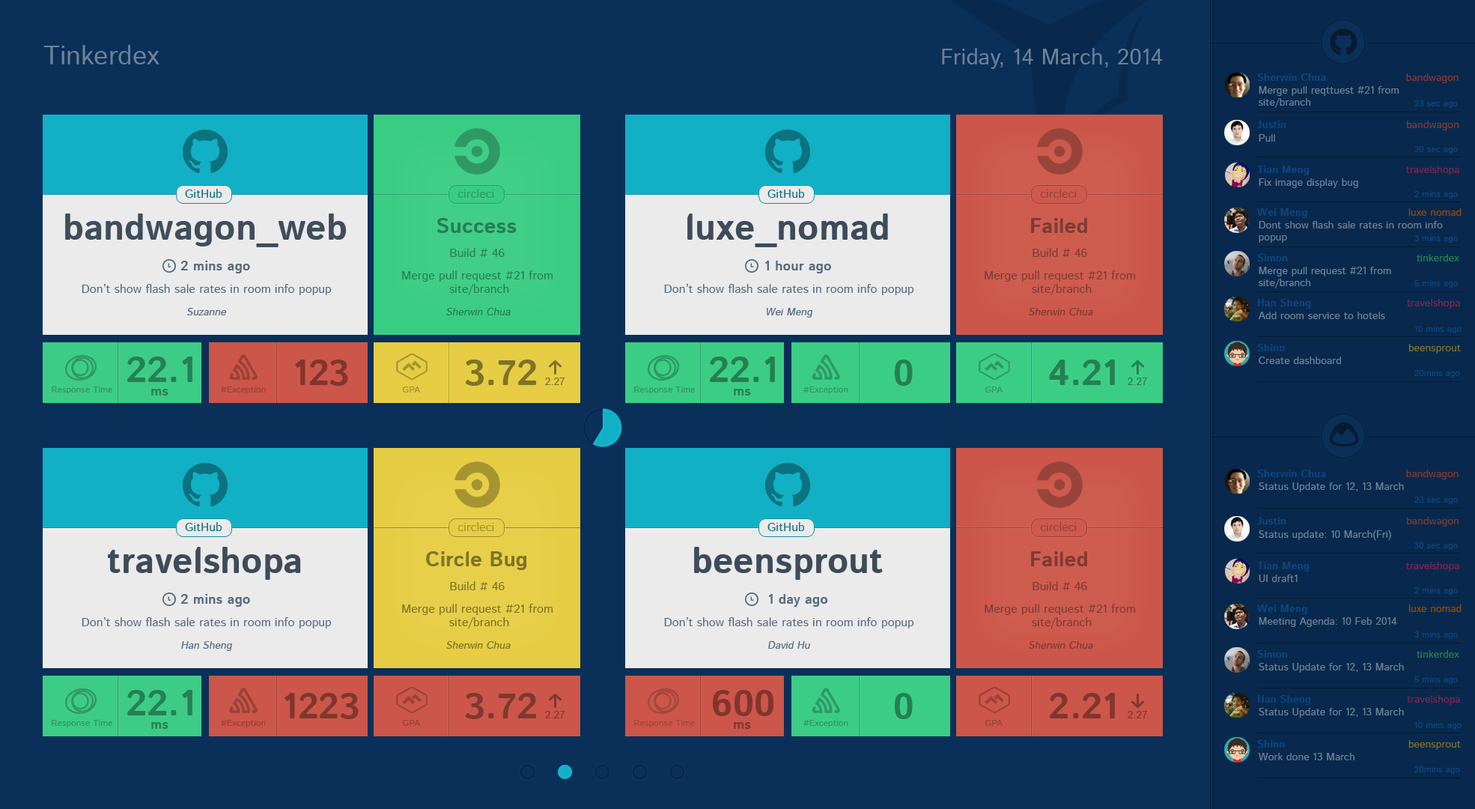
<style>
.page{position:relative;width:1475px;height:809px;background:#0a3059}
.page>*{position:absolute;margin:0}
.t1{font:27px "Istok-Regular";color:#6e8197}
.t2{font:22.5px "Istok-Regular";color:#6e8197}
.t3{font:10.5px "Istok-Bold";color:#0e4580}
.t4{font:10.5px "Istok-Regular";color:#803a32}
.t5{font:10.5px/12px "Istok-Regular";color:#6e8197}
.t6{font:9px "Istok-Regular";color:#0e4580}
.t7{font:10.5px "Istok-Regular";color:#6e8197}
.t8{font:10.5px "Istok-Regular";color:#80254f}
.t9{font:12px "Istok-Regular";color:#0b7280}
.t10{font:12px "Istok-Regular";color:#2b9962}
.t11{font:12px "Istok-Regular";color:#99443a}
.t12{font:10.5px "Istok-Regular";color:#994700}
.t13{font:35.9px "Istok-Bold";color:#404e5c}
.t14{font:21px "Istok-Bold";color:#288054}
.t15{font:35.9px "Istok-Bold";color:#3e4b59}
.t16{font:21px "Istok-Bold";color:#803a32}
.t17{font:12px "Istok-Regular";color:#248052}
.t18{font:12px "Istok-Regular";color:#803a32}
.t19{font:10.5px "Istok-Regular";color:#258052}
.t20{font:13.5px "Istok-Bold";color:#596c80}
.t21{font:12px/13.5px "Istok-Regular";color:#248052}
.t22{font:12px/22.5px "Istok-Regular";color:#248052}
.t23{font:12px/13.5px "Istok-Regular";color:#803a32}
.t24{font:12px/22.5px "Istok-Regular";color:#803a32}
.t25{font:12px "Istok-Regular";color:#596c80}
.t26{font:10.5px "Istok-Regular";color:#596c80;font-style:italic}
.t27{font:10.5px "Istok-Regular";color:#248052;font-style:italic}
.t28{font:10.5px "Istok-Regular";color:#803a32;font-style:italic}
.t29{font:10.5px "Istok-Regular";color:#807225}
.t30{font:35.9px "Istok-Bold";color:#268053}
.t31{font:35.2px "Istok-Bold";color:#80362e}
.t32{font:35.9px "Istok-Bold";color:#807225}
.t33{font:35.9px "Istok-Bold";color:#258052}
.t34{font:35.2px "Istok-Bold";color:#258052}
.t35{font:9px "Istok-Regular";color:#2e9963}
.t36{font:13.5px "Istok-Bold";color:#268053}
.t37{font:9px "Istok-Regular";color:#994137}
.t38{font:9px "Istok-Regular";color:#a69430}
.t39{font:9px "Istok-Regular";color:#2c9963}
.t40{font:13.5px "Istok-Bold";color:#258052}
.t41{font:12px "Istok-Regular";color:#a69432}
.t42{font:12px "Istok-Regular";color:#994137}
.t43{font:21px "Istok-Bold";color:#807226}
.t44{font:12px "Istok-Regular";color:#807226}
.t45{font:12px/13.5px "Istok-Regular";color:#807226}
.t46{font:12px/22.5px "Istok-Regular";color:#807226}
.t47{font:10.5px "Istok-Regular";color:#807226;font-style:italic}
.t48{font:35.9px "Istok-Bold";color:#80362e}
.t49{font:35.9px "Istok-Bold";color:#803830}
.t50{font:10.5px "Istok-Regular";color:#803830}
.t51{font:10.5px "Istok-Regular";color:#80362e}
.t52{font:9px "Istok-Regular";color:#a6463c}
.t53{font:13.5px "Istok-Bold";color:#80362e}
</style>
<div class="page">
<p class="t1" style="left:43px;top:45px;width:116px;height:19px">Tinkerdex</p>
<p class="t2" style="left:942px;top:48px;width:221px;height:21px">Friday, 14 March, 2014</p>
<p class="t3" style="left:1257px;top:73px;width:201px;height:10px">Sherwin Chua             <span class="t4">bandwagon</span></p>
<p class="t5" style="left:1258px;top:86px;width:141px;height:22px">Merge pull reqttuest #21 from <br>site/branch</p>
<p class="t6" style="left:1414px;top:100px;width:44px;height:8px">23 sec ago</p>
<p class="t4" style="left:1257px;top:121px;width:202px;height:9px"><span class="t3">Justin         </span>bandwagon</p>
<p class="t7" style="left:1258px;top:134px;width:17px;height:7px">Pull</p>
<p class="t6" style="left:1414px;top:146px;width:44px;height:7px">30 sec ago</p>
<p class="t8" style="left:1257px;top:165px;width:202px;height:10px"><span class="t3">Tian Meng             </span>travelshopa</p>
<p class="t7" style="left:1258px;top:178px;width:100px;height:10px">Fix image display bug</p>
<p class="t9" style="left:185px;top:189px;width:37px;height:9px">GitHub</p>
<p class="t10" style="left:457px;top:189px;width:37px;height:9px">circleci</p>
<p class="t9" style="left:767px;top:189px;width:38px;height:9px">GitHub</p>
<p class="t11" style="left:1040px;top:189px;width:37px;height:9px">circleci</p>
<p class="t6" style="left:1414px;top:191px;width:44px;height:7px">2 mins ago</p>
<p class="t12" style="left:1257px;top:208px;width:204px;height:10px"><span class="t3">Wei Meng               </span>luxe nomad</p>
<p class="t13" style="left:65px;top:213px;width:282px;height:34px">bandwagon_web</p>
<p class="t14" style="left:437px;top:218px;width:80px;height:15px">Success</p>
<p class="t15" style="left:687px;top:213px;width:201px;height:34px">luxe_nomad</p>
<p class="t16" style="left:1031px;top:218px;width:56px;height:15px">Failed</p>
<p class="t5" style="left:1258px;top:221px;width:185px;height:22px">Dont show flash sale rates in room info popup</p>
<p class="t6" style="left:1414px;top:235px;width:44px;height:8px">3 mins ago</p>
<p class="t17" style="left:450px;top:248px;width:55px;height:9px">Build # 46</p>
<p class="t18" style="left:1032px;top:248px;width:55px;height:9px">Build # 46</p>
<p class="t19" style="left:1257px;top:254px;width:202px;height:7px"><span class="t3">Simon          </span>tinkerdex</p>
<p class="t20" style="left:180px;top:261px;width:70px;height:12px">2 mins ago</p>
<p class="t20" style="left:765px;top:261px;width:66px;height:12px">1 hour ago</p>
<p class="t5" style="left:1258px;top:267px;width:133px;height:21px">Merge pull request #21 from <br>site/branch</p>
<p class="t21" style="left:402px;top:270px;width:151px;height:26px;text-align:center"><span class="t22">Merge pull reque</span>st #21 from <br>site/branch</p>
<p class="t23" style="left:984px;top:270px;width:152px;height:26px;text-align:center"><span class="t24">Merge pull reque</span>st #21 from <br>site/branch</p>
<p class="t6" style="left:1414px;top:280px;width:44px;height:7px">5 mins ago</p>
<p class="t25" style="left:82px;top:284px;width:250px;height:11px">Don’t show flash sale rates in room info popup</p>
<p class="t25" style="left:664px;top:284px;width:250px;height:11px">Don’t show flash sale rates in room info popup</p>
<p class="t8" style="left:1258px;top:299px;width:202px;height:9px"><span class="t3">Han Sheng        </span>travelshopa</p>
<p class="t26" style="left:186px;top:308px;width:40px;height:7px">Suzanne</p>
<p class="t27" style="left:446px;top:308px;width:65px;height:7px">Sherwin Chua</p>
<p class="t26" style="left:766px;top:308px;width:47px;height:9px">Wei Meng</p>
<p class="t28" style="left:1029px;top:308px;width:64px;height:7px">Sherwin Chua</p>
<p class="t7" style="left:1258px;top:311px;width:127px;height:8px">Add room service to hotels</p>
<p class="t6" style="left:1414px;top:326px;width:47px;height:7px">10 mins ago</p>
<p class="t29" style="left:1257px;top:344px;width:204px;height:9px"><span class="t3">Shinn         </span>beensprout</p>
<p class="t30" style="left:127px;top:356px;width:65px;height:26px">22.1</p>
<p class="t31" style="left:295px;top:359px;width:53px;height:27px">123</p>
<p class="t32" style="left:465px;top:359px;width:71px;height:27px">3.72</p>
<p class="t33" style="left:710px;top:356px;width:65px;height:26px">22.1</p>
<p class="t34" style="left:895px;top:359px;width:18px;height:27px">0</p>
<p class="t33" style="left:1049px;top:359px;width:66px;height:26px">4.21</p>
<p class="t7" style="left:1258px;top:356px;width:83px;height:8px">Create dashboard</p>
<p class="t29" style="left:545px;top:377px;width:19px;height:8px">2.27</p>
<p class="t19" style="left:1127px;top:377px;width:20px;height:8px">2.27</p>
<p class="t6" style="left:1414px;top:370px;width:46px;height:7px">20mins ago</p>
<p class="t35" style="left:52px;top:386px;width:60px;height:8px">Response Time</p>
<p class="t36" style="left:151px;top:389px;width:17px;height:6px">ms</p>
<p class="t37" style="left:221px;top:386px;width:45px;height:8px">#Exception</p>
<p class="t38" style="left:402px;top:386px;width:19px;height:6px">GPA</p>
<p class="t39" style="left:634px;top:386px;width:61px;height:8px">Response Time</p>
<p class="t40" style="left:734px;top:389px;width:17px;height:6px">ms</p>
<p class="t39" style="left:803px;top:386px;width:45px;height:8px">#Exception</p>
<p class="t39" style="left:984px;top:386px;width:19px;height:6px">GPA</p>
<p class="t3" style="left:1257px;top:469px;width:201px;height:10px">Sherwin Chua             <span class="t4">bandwagon</span></p>
<p class="t7" style="left:1258px;top:482px;width:146px;height:10px">Status Update for 12, 13 March</p>
<p class="t6" style="left:1414px;top:496px;width:44px;height:8px">23 sec ago</p>
<p class="t9" style="left:185px;top:522px;width:37px;height:9px">GitHub</p>
<p class="t41" style="left:457px;top:522px;width:37px;height:9px">circleci</p>
<p class="t9" style="left:767px;top:522px;width:38px;height:9px">GitHub</p>
<p class="t42" style="left:1040px;top:522px;width:37px;height:9px">circleci</p>
<p class="t4" style="left:1257px;top:517px;width:202px;height:9px"><span class="t3">Justin         </span>bandwagon</p>
<p class="t7" style="left:1258px;top:529px;width:133px;height:12px">Status update: 10 March(Fri)</p>
<p class="t6" style="left:1414px;top:542px;width:44px;height:8px">30 sec ago</p>
<p class="t15" style="left:108px;top:547px;width:193px;height:32px">travelshopa</p>
<p class="t43" style="left:426px;top:551px;width:100px;height:19px">Circle Bug</p>
<p class="t15" style="left:694px;top:547px;width:189px;height:32px">beensprout</p>
<p class="t16" style="left:1031px;top:551px;width:56px;height:15px">Failed</p>
<p class="t8" style="left:1257px;top:561px;width:202px;height:10px"><span class="t3">Tian Meng             </span>travelshopa</p>
<p class="t44" style="left:450px;top:581px;width:55px;height:9px">Build # 46</p>
<p class="t18" style="left:1032px;top:581px;width:55px;height:9px">Build # 46</p>
<p class="t7" style="left:1258px;top:574px;width:39px;height:8px">UI draft1</p>
<p class="t20" style="left:180px;top:594px;width:70px;height:12px">2 mins ago</p>
<p class="t20" style="left:768px;top:594px;width:60px;height:12px">1 day ago</p>
<p class="t6" style="left:1414px;top:587px;width:44px;height:7px">2 mins ago</p>
<p class="t45" style="left:402px;top:603px;width:151px;height:26px;text-align:center"><span class="t46">Merge pull reque</span>st #21 from <br>site/branch</p>
<p class="t23" style="left:984px;top:603px;width:152px;height:26px;text-align:center"><span class="t24">Merge pull reque</span>st #21 from <br>site/branch</p>
<p class="t12" style="left:1257px;top:604px;width:204px;height:10px"><span class="t3">Wei Meng               </span>luxe nomad</p>
<p class="t25" style="left:82px;top:617px;width:250px;height:11px">Don’t show flash sale rates in room info popup</p>
<p class="t25" style="left:664px;top:617px;width:250px;height:11px">Don’t show flash sale rates in room info popup</p>
<p class="t7" style="left:1258px;top:617px;width:139px;height:10px">Meeting Agenda: 10 Feb 2014</p>
<p class="t26" style="left:181px;top:641px;width:51px;height:10px">Han Sheng</p>
<p class="t47" style="left:446px;top:641px;width:65px;height:7px">Sherwin Chua</p>
<p class="t26" style="left:768px;top:641px;width:42px;height:7px">David Hu</p>
<p class="t28" style="left:1029px;top:641px;width:64px;height:7px">Sherwin Chua</p>
<p class="t6" style="left:1414px;top:631px;width:44px;height:8px">3 mins ago</p>
<p class="t19" style="left:1257px;top:650px;width:202px;height:7px"><span class="t3">Simon          </span>tinkerdex</p>
<p class="t7" style="left:1258px;top:663px;width:146px;height:9px">Status Update for 12, 13 March</p>
<p class="t6" style="left:1414px;top:676px;width:44px;height:8px">5 mins ago</p>
<p class="t30" style="left:127px;top:689px;width:65px;height:26px">22.1</p>
<p class="t48" style="left:713px;top:689px;width:61px;height:27px">600</p>
<p class="t31" style="left:284px;top:692px;width:75px;height:27px">1223</p>
<p class="t49" style="left:465px;top:692px;width:71px;height:27px">3.72</p>
<p class="t34" style="left:895px;top:692px;width:18px;height:27px">0</p>
<p class="t48" style="left:1050px;top:692px;width:65px;height:26px">2.21</p>
<p class="t8" style="left:1258px;top:695px;width:202px;height:9px"><span class="t3">Han Sheng        </span>travelshopa</p>
<p class="t50" style="left:545px;top:710px;width:19px;height:8px">2.27</p>
<p class="t51" style="left:1127px;top:710px;width:20px;height:8px">2.27</p>
<p class="t7" style="left:1258px;top:707px;width:146px;height:10px">Status Update for 12, 13 March</p>
<p class="t35" style="left:52px;top:719px;width:60px;height:8px">Response Time</p>
<p class="t36" style="left:151px;top:722px;width:17px;height:6px">ms</p>
<p class="t37" style="left:221px;top:719px;width:45px;height:8px">#Exception</p>
<p class="t37" style="left:402px;top:719px;width:19px;height:6px">GPA</p>
<p class="t52" style="left:634px;top:719px;width:61px;height:8px">Response Time</p>
<p class="t53" style="left:734px;top:722px;width:17px;height:6px">ms</p>
<p class="t39" style="left:803px;top:719px;width:45px;height:8px">#Exception</p>
<p class="t37" style="left:984px;top:719px;width:19px;height:6px">GPA</p>
<p class="t6" style="left:1414px;top:722px;width:47px;height:7px">10 mins ago</p>
<p class="t29" style="left:1257px;top:740px;width:204px;height:9px"><span class="t3">Shinn         </span>beensprout</p>
<p class="t7" style="left:1258px;top:752px;width:97px;height:8px">Work done 13 March</p>
<p class="t6" style="left:1414px;top:766px;width:46px;height:7px">20mins ago</p>
</div>
